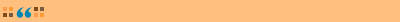
<style>
.page{position:relative;width:400px;height:22px;background:#febf7f}
.page>*{position:absolute;margin:0}
.t1{font:36px "PerpetuaTitlingMT-Bold";color:#0086b1}
</style>
<div class="page">
<p class="t1" style="left:16px;top:7px;width:16px;height:11px">“</p>
</div>
